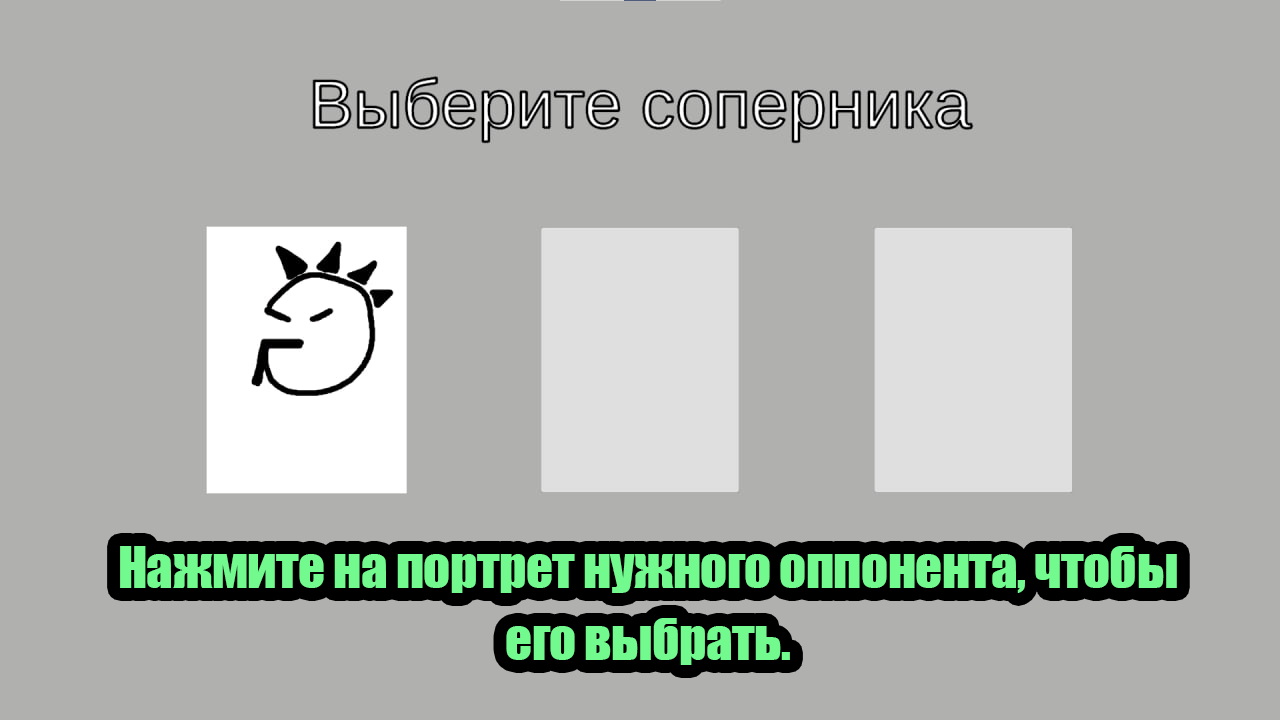
<style>
.page{position:relative;width:1280px;height:720px;background:#b0b0ae}
.page>*{position:absolute;margin:0}
.t1{font:53.3px/24px "Impact";letter-spacing:-0.015em;color:#73fa8f}
</style>
<div class="page">
<p class="t1" style="left:120px;top:546px;width:1057px;height:119px;text-align:center">Нажмите на портрет нужного оппонента, чтобы<br><br><br>его выбрать.</p>
</div>
